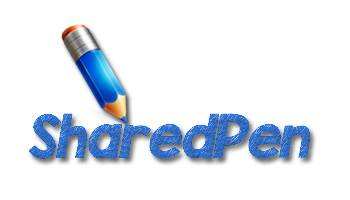
<style>
.page{position:relative;width:350px;height:200px;background:#ffffff}
.page>*{position:absolute;margin:0}
.t1{font:48px "KGBlankSpaceSketch";color:#3073d6;font-style:italic}
</style>
<div class="page">
<p class="t1" style="left:29px;top:114px;width:281px;height:45px">SharedPen</p>
</div>
